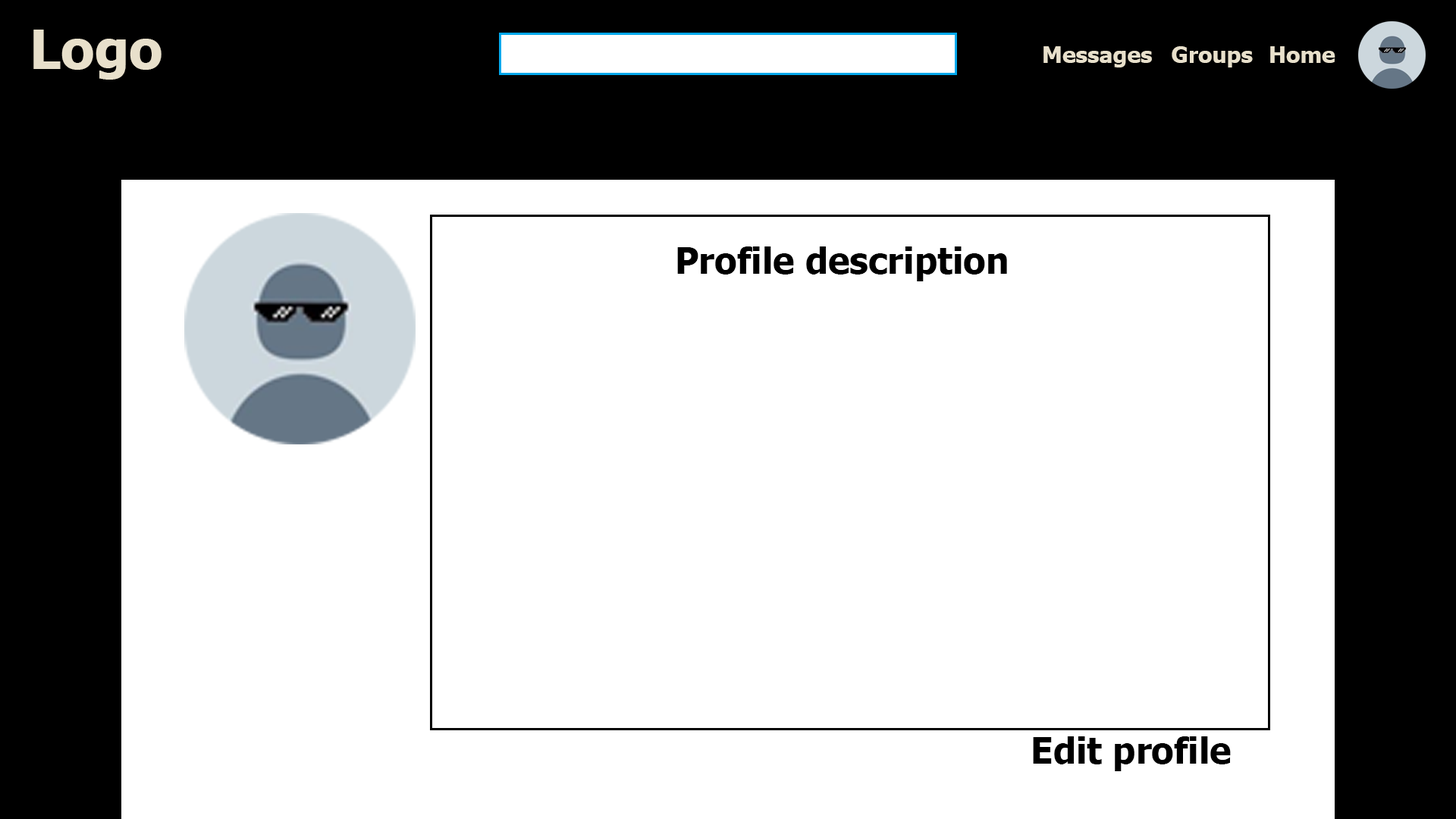
<style>
.page{position:relative;width:1456px;height:819px;background:#ffffff}
.page>*{position:absolute;margin:0}
.t1{font:54.6px "Tahoma-Bold";color:#e8e0cb}
.t2{font:22.7px "Tahoma-Bold";color:#e8e0cb}
.t3{font:36.4px "Tahoma-Bold";color:#000000}
</style>
<div class="page">
<p class="t1" style="left:33px;top:30px;width:129px;height:50px">Logo</p>
<p class="t2" style="left:1043px;top:46px;width:109px;height:21px">Messages</p>
<p class="t2" style="left:1172px;top:46px;width:81px;height:21px">Groups</p>
<p class="t2" style="left:1270px;top:46px;width:65px;height:17px">Home</p>
<p class="t3" style="left:677px;top:246px;width:330px;height:35px">Profile description</p>
<p class="t3" style="left:1033px;top:736px;width:198px;height:35px">Edit profile</p>
</div>
